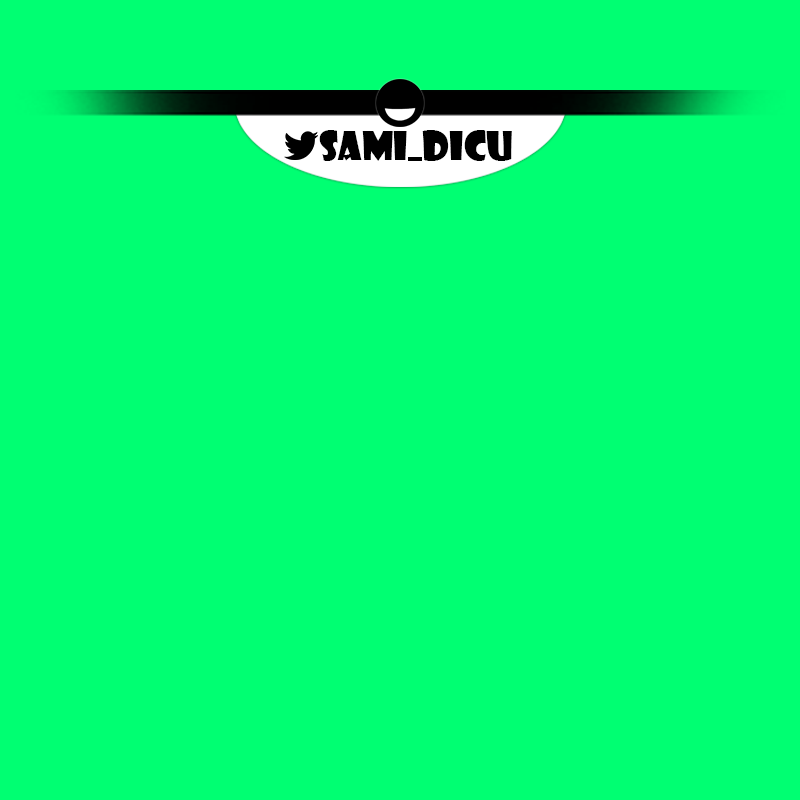
<style>
.page{position:relative;width:800px;height:800px;background:#00ff72}
.page>*{position:absolute;margin:0}
.t1{font:38.5px "ShowcardGothic-Reg";color:#000000}
.t2{font:40.2px "ShowcardGothic-Reg";color:#000000;scale:0.69 1}
</style>
<div class="page">
<p class="t1" style="left:319px;top:130px;width:193px;height:31px">sami<span class="t2">_</span>dicu</p>
</div>
